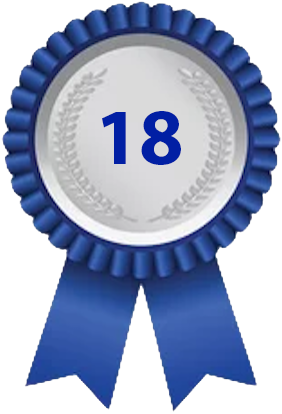
<style>
.page{position:relative;width:282px;height:414px;background:#ffffff}
.page>*{position:absolute;margin:0}
.t1{font:80px "MyriadPro-Bold";color:#011fa4}
</style>
<div class="page">
<p class="t1" style="left:102px;top:111px;width:79px;height:54px">18</p>
</div>
